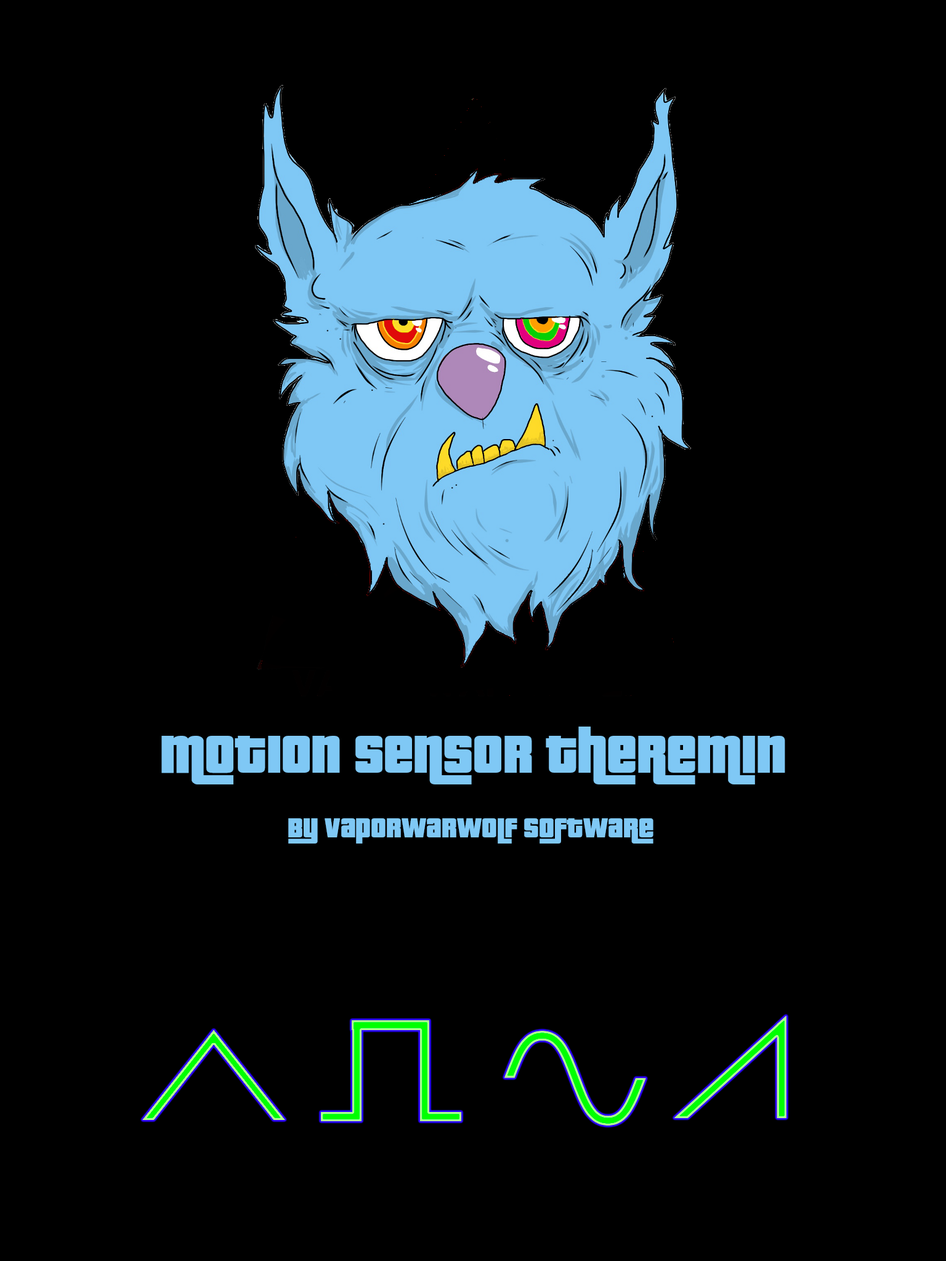
<style>
.page{position:relative;width:946px;height:1261px;background:#000000}
.page>*{position:absolute;margin:0}
.t1{font:58px "PricedownBl-Regular";color:#7fc8f5}
.t2{font:29.6px "PricedownBl-Regular";color:#7fc8f5}
</style>
<div class="page">
<p class="t1" style="left:161px;top:727px;width:624px;height:57px">Motion Sensor Theremin</p>
<p class="t2" style="left:288px;top:818px;width:365px;height:25px">By vaporwarwolf software</p>
</div>
